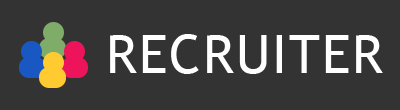
<style>
.page{position:relative;width:400px;height:110px;background:#333333}
.page>*{position:absolute;margin:0}
.t1{font:52.8px "TrebuchetMS";letter-spacing:0.04em;color:#ffffff}
</style>
<div class="page">
<p class="t1" style="left:110px;top:34px;width:273px;height:40px">RECRUITER</p>
</div>
